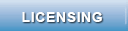
<style>
.page{position:relative;width:128px;height:31px}
.page>*{position:absolute;margin:0}
.t1{font:14.4px "Arial-BoldMT";letter-spacing:0.025em;color:#ffffff}
</style>
<div class="page">
<p class="t1" style="left:22px;top:12px;width:80px;height:10px">LICENSING</p>
</div>
